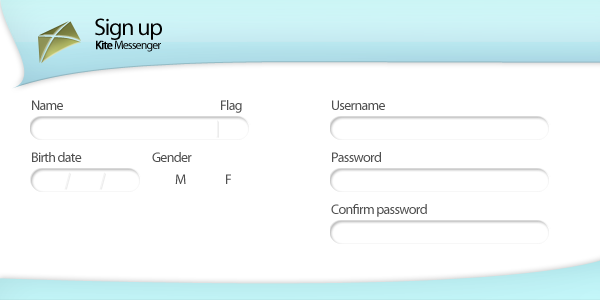
<style>
.page{position:relative;width:600px;height:300px;background:#ffffff}
.page>*{position:absolute;margin:0}
.t1{font:24px "MyriadPro-Regular";letter-spacing:-0.05em;color:#000000}
.t2{font:12px "MyriadPro-Regular";letter-spacing:-0.075em;color:#000000}
.t3{font:12px "MyriadPro-Regular";letter-spacing:-0.075em;color:#000000;font-weight:bold}
.t4{font:14px "MyriadPro-Regular";letter-spacing:-0.05em;color:#505050}
</style>
<div class="page">
<p class="t1" style="left:95px;top:18px;width:67px;height:22px">Sign up</p>
<p class="t2" style="left:96px;top:40px;width:65px;height:12px"><span class="t3">Kite </span>Messenger</p>
<p class="t4" style="left:32px;top:100px;width:31px;height:10px">Name</p>
<p class="t4" style="left:221px;top:100px;width:21px;height:13px">Flag</p>
<p class="t4" style="left:332px;top:100px;width:53px;height:10px">Username</p>
<p class="t4" style="left:32px;top:152px;width:50px;height:10px">Birth date</p>
<p class="t4" style="left:152px;top:152px;width:40px;height:10px">Gender</p>
<p class="t4" style="left:332px;top:152px;width:49px;height:10px">Password</p>
<p class="t4" style="left:175px;top:174px;width:11px;height:10px">M</p>
<p class="t4" style="left:226px;top:174px;width:5px;height:10px">F</p>
<p class="t4" style="left:331px;top:204px;width:96px;height:13px">Confirm password</p>
</div>
